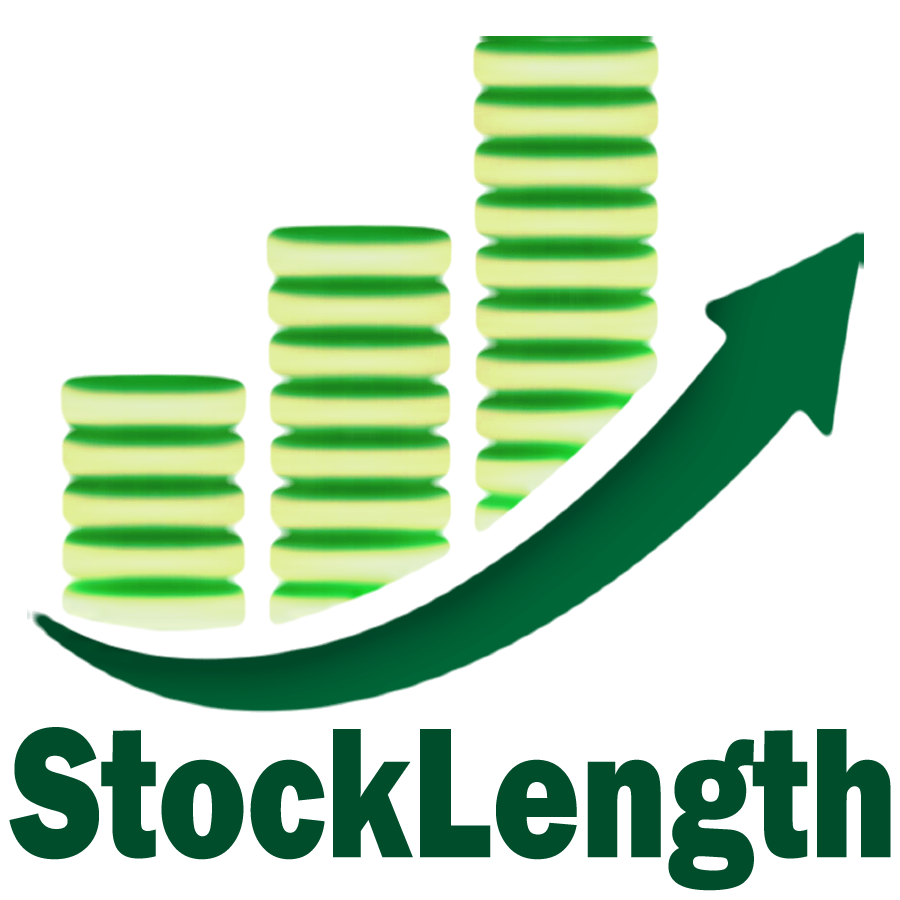
<style>
.page{position:relative;width:900px;height:900px;background:#ffffff}
.page>*{position:absolute;margin:0}
.t1{font:192.1px "FranklinGothic-Heavy";color:#004d2c;scale:0.78 1}
</style>
<div class="page">
<p class="t1" style="left:9px;top:727px;width:882px;height:164px">StockLength</p>
</div>
